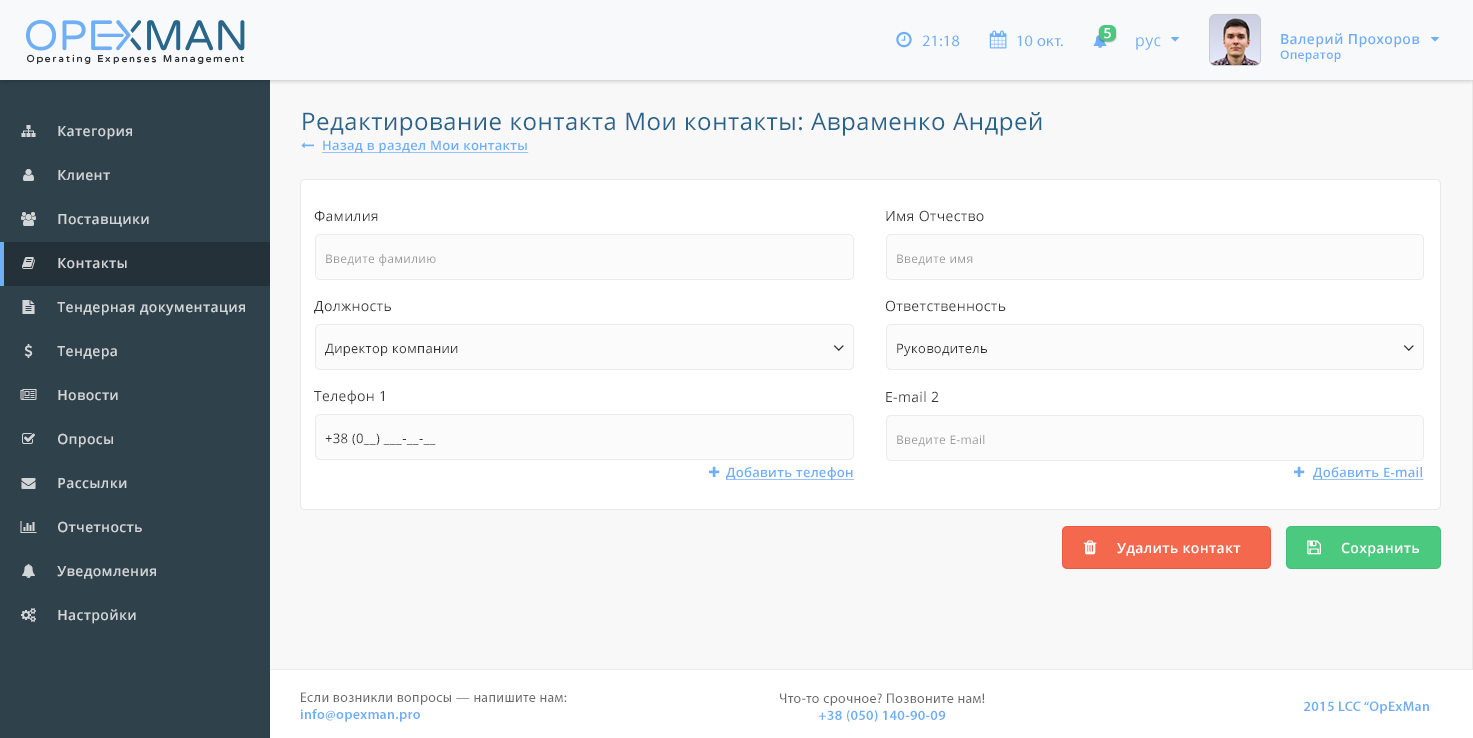
<style>
.page{position:relative;width:1473px;height:738px;background:#f8f8f8}
.page>*{position:absolute;margin:0}
.t1{font:13.9px "OpenSans-Semibold";letter-spacing:0.025em;color:#ffffff}
.t2{font:15.9px "MyriadPro-Regular";letter-spacing:0.025em;color:#6faff8}
.t3{font:15.9px "OpenSans";letter-spacing:0.025em;color:#6eaff8}
.t4{font:13.9px "OpenSans-Semibold";letter-spacing:0.025em;color:#6eaef7}
.t5{font:12px "OpenSans-Semibold";letter-spacing:0.025em;color:#6eaef7}
.t6{font:23.9px "OpenSans";letter-spacing:0.025em;color:#29658b}
.t7{font:13.9px "OpenSans-Semibold";letter-spacing:0.025em;color:#d2d5d7}
.t8{font:13px "OpenSans-Semibold";letter-spacing:0.025em;color:#6faff8;text-decoration:underline}
.t9{font:13.9px "OpenSans";letter-spacing:0.025em;color:#373838}
.t10{font:12px "OpenSans";letter-spacing:0.025em;color:#999999}
.t11{font:13px "OpenSans";letter-spacing:0.025em;color:#333333}
.t12{font:13.9px "MyriadPro-Regular";letter-spacing:0.025em;color:#696969}
.t13{font:13.9px "MyriadPro-Semibold";letter-spacing:0.025em;color:#6eaef8}
</style>
<div class="page">
<p class="t1" style="left:1104px;top:28px;width:7px;height:11px">5</p>
<p class="t2" style="left:922px;top:35px;width:38px;height:12px">21:18</p>
<p class="t2" style="left:1017px;top:35px;width:46px;height:12px">10 окт.</p>
<p class="t3" style="left:1136px;top:37px;width:25px;height:13px">рус</p>
<p class="t4" style="left:1280px;top:33px;width:140px;height:29px">Валерий Прохоров<br><span class="t5">Оператор</span></p>
<p class="t6" style="left:303px;top:112px;width:739px;height:24px">Редактирование контакта Мои контакты: Авраменко Андрей</p>
<p class="t7" style="left:58px;top:126px;width:74px;height:14px">Категория</p>
<p class="t8" style="left:322px;top:140px;width:207px;height:13px">Назад в раздел Мои контакты</p>
<p class="t7" style="left:58px;top:170px;width:52px;height:11px">Клиент</p>
<p class="t7" style="left:58px;top:214px;width:91px;height:13px">Поставщики</p>
<p class="t9" style="left:314px;top:210px;width:64px;height:12px">Фамилия</p>
<p class="t9" style="left:886px;top:210px;width:98px;height:12px">Имя Отчество</p>
<p class="t10" style="left:326px;top:254px;width:110px;height:12px">Введите фамилию</p>
<p class="t10" style="left:897px;top:254px;width:76px;height:12px">Введите имя</p>
<p class="t7" style="left:58px;top:258px;width:69px;height:11px">Контакты</p>
<p class="t7" style="left:57px;top:302px;width:188px;height:14px">Тендерная документация</p>
<p class="t9" style="left:314px;top:301px;width:77px;height:13px">Должность</p>
<p class="t9" style="left:885px;top:300px;width:121px;height:12px">Ответственность</p>
<p class="t7" style="left:57px;top:346px;width:60px;height:14px">Тендера</p>
<p class="t11" style="left:325px;top:343px;width:133px;height:13px">Директор компании</p>
<p class="t11" style="left:897px;top:343px;width:90px;height:13px">Руководитель</p>
<p class="t7" style="left:58px;top:390px;width:60px;height:11px">Новости</p>
<p class="t9" style="left:314px;top:390px;width:70px;height:15px">Телефон 1</p>
<p class="t9" style="left:886px;top:391px;width:53px;height:12px">E-mail 2</p>
<p class="t7" style="left:58px;top:433px;width:55px;height:15px">Опросы</p>
<p class="t11" style="left:325px;top:433px;width:111px;height:12px">+38 (0__) ___-__-__</p>
<p class="t10" style="left:897px;top:435px;width:88px;height:12px">Введите E-mail</p>
<p class="t8" style="left:726px;top:467px;width:128px;height:13px">Добавить телефон</p>
<p class="t8" style="left:1313px;top:467px;width:111px;height:13px">Добавить E-mail</p>
<p class="t7" style="left:58px;top:478px;width:69px;height:11px">Рассылки</p>
<p class="t7" style="left:58px;top:521px;width:84px;height:12px">Отчетность</p>
<p class="t1" style="left:1117px;top:543px;width:124px;height:13px">Удалить контакт</p>
<p class="t1" style="left:1341px;top:542px;width:78px;height:15px">Сохранить</p>
<p class="t7" style="left:57px;top:566px;width:99px;height:13px">Уведомления</p>
<p class="t7" style="left:58px;top:609px;width:78px;height:15px">Настройки</p>
<p class="t12" style="left:300px;top:692px;width:267px;height:30px">Если возникли вопросы — напишите нам:<br><span class="t13">info@opexman.pro</span></p>
<p class="t12" style="left:780px;top:693px;width:205px;height:29px;text-align:center">Что-то срочное? Позвоните нам!<br><span class="t13">+38 (050) 140-90-09</span></p>
<p class="t13" style="left:1304px;top:701px;width:125px;height:13px">2015 LCC “OpExMan</p>
</div>
